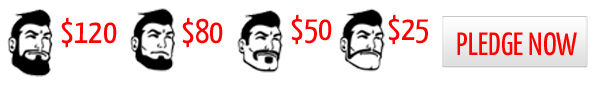
<style>
.page{position:relative;width:600px;height:94px;background:#ffffff}
.page>*{position:absolute;margin:0}
.t1{font:34.2px "YanoneKaffeesatz-Regular";color:#ff0000;text-transform:uppercase}
.t2{font:32.1px "YanoneKaffeesatz-Regular";color:#ff0000;text-transform:uppercase}
</style>
<div class="page">
<p class="t1" style="left:61px;top:17px;width:56px;height:31px">$120</p>
<p class="t1" style="left:182px;top:17px;width:41px;height:31px">$80</p>
<p class="t1" style="left:291px;top:14px;width:41px;height:31px">$50</p>
<p class="t1" style="left:388px;top:14px;width:40px;height:31px">$25</p>
<p class="t2" style="left:457px;top:32px;width:120px;height:24px">PLEDGE NOW</p>
</div>
